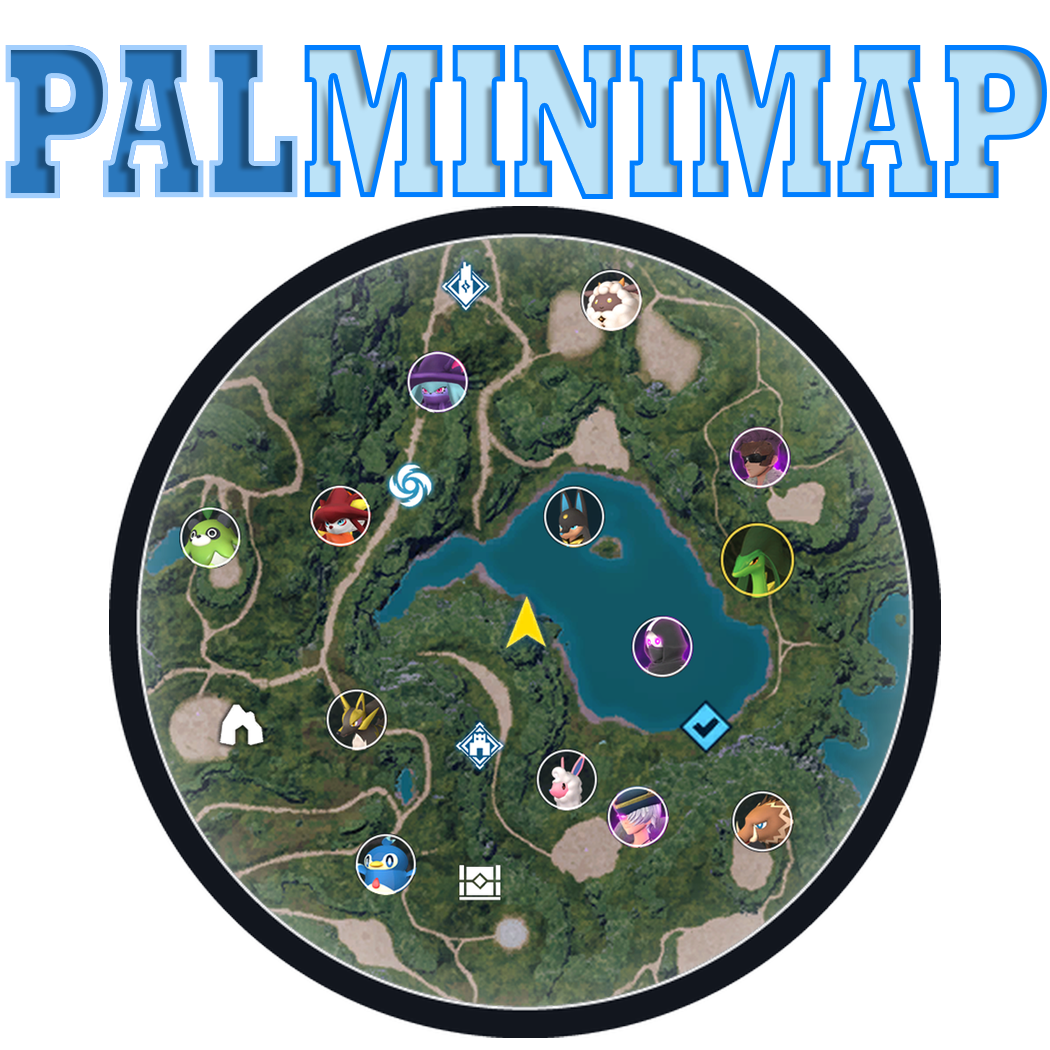
<style>
.page{position:relative;width:1050px;height:1050px;background:#ffffff}
.page>*{position:absolute;margin:0}
.t1{font:224px "Rockwell-ExtraBold";scale:0.6 1}
</style>
<div class="page">
<p class="t1" style="left:5px;top:45px;width:1042px;height:154px">PALMINIMAP</p>
<p class="t1" style="left:5px;top:45px;width:293px;height:153px">PAL</p>
</div>
